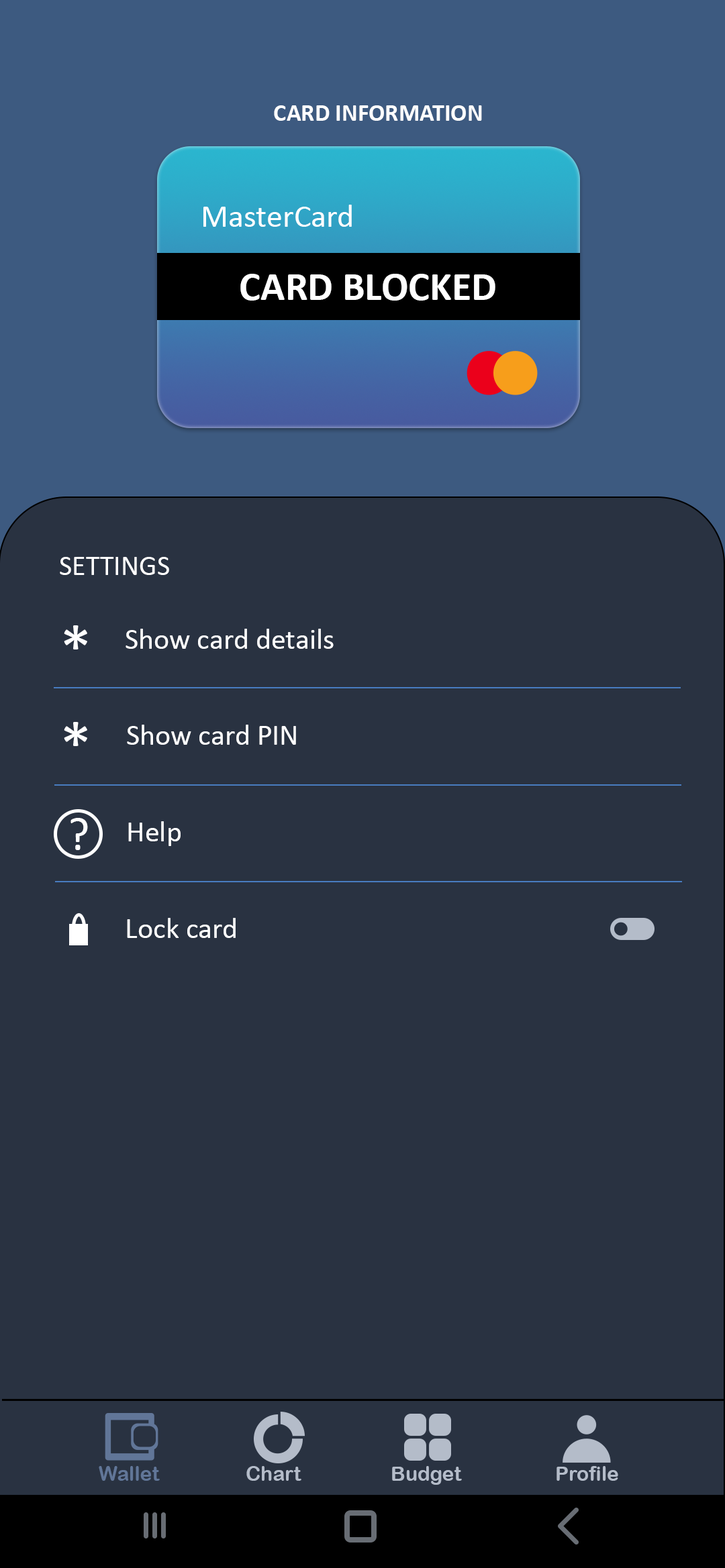
<style>
.page{position:relative;width:725px;height:1568px;background:#293241}
.page>*{position:absolute;margin:0}
.t1{font:24.2px "Calibri-Bold";color:#ffffff}
.t2{font:32.2px "Calibri";color:#ffffff}
.t3{font:40.3px "Calibri-Bold";color:#ffffff}
.t4{font:28.2px "Calibri";color:#ffffff}
.t5{font:67.1px "Calibri";color:#ffffff}
.t6{font:29.5px "Calibri";color:#ffffff}
.t7{font:46.8px "Calibri";color:#ffffff}
.t8{font:20.1px "ArialRoundedMTBold";color:#617698}
.t9{font:20.1px "ArialRoundedMTBold";color:#b4bcc9}
</style>
<div class="page">
<p class="t1" style="left:274px;top:105px;width:208px;height:16px">CARD INFORMATION</p>
<p class="t2" style="left:203px;top:205px;width:149px;height:22px">MasterCard</p>
<p class="t3" style="left:240px;top:274px;width:255px;height:27px">CARD BLOCKED</p>
<p class="t4" style="left:60px;top:557px;width:109px;height:18px">SETTINGS</p>
<p class="t5" style="left:64px;top:625px;width:23px;height:24px">*</p>
<p class="t6" style="left:125px;top:629px;width:208px;height:20px">Show card details</p>
<p class="t5" style="left:64px;top:722px;width:23px;height:24px">*</p>
<p class="t6" style="left:127px;top:725px;width:169px;height:20px">Show card PIN</p>
<p class="t7" style="left:70px;top:818px;width:18px;height:32px">?</p>
<p class="t6" style="left:128px;top:821px;width:52px;height:25px">Help</p>
<p class="t6" style="left:127px;top:918px;width:109px;height:20px">Lock card</p>
<p class="t8" style="left:99px;top:1466px;width:61px;height:15px">Wallet</p>
<p class="t9" style="left:246px;top:1466px;width:55px;height:15px">Chart</p>
<p class="t9" style="left:392px;top:1466px;width:70px;height:19px">Budget</p>
<p class="t9" style="left:556px;top:1466px;width:62px;height:15px">Profile</p>
</div>
